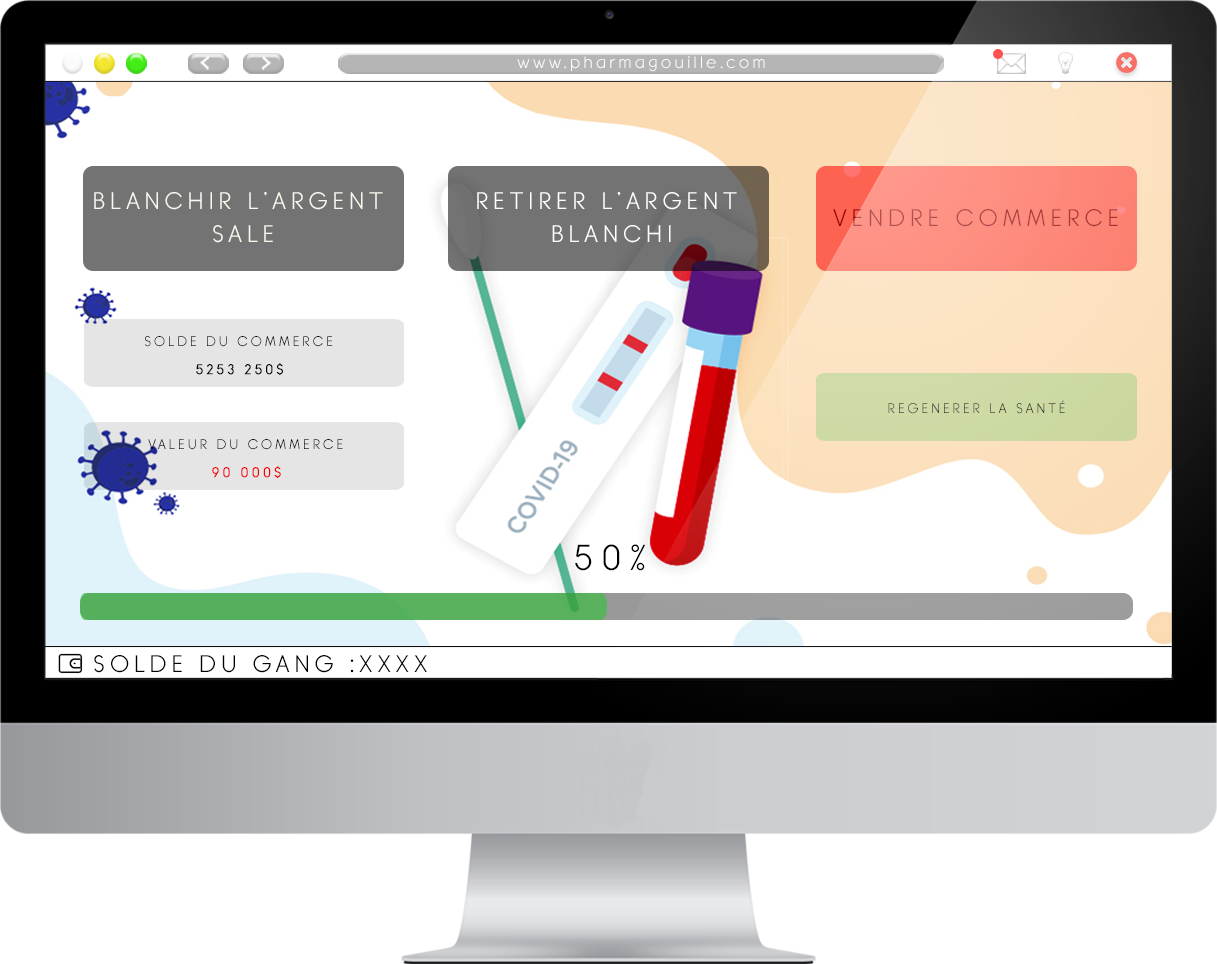
<style>
.page{position:relative;width:1217px;height:964px;background:#ffffff}
.page>*{position:absolute;margin:0}
.t1{font:16.4px "BanksMilesSingleLine";letter-spacing:0.2em;color:#ffffff}
.t2{font:24px/32px "BanksMilesSingleLine";letter-spacing:0.2em;color:#fbf8ee}
.t3{font:24px/32px "BanksMilesSingleLine";letter-spacing:0.2em;color:#ffffff}
.t4{font:24px "BanksMilesSingleLine";letter-spacing:0.2em;color:#ac4747}
.t5{font:14px "BanksMilesSingleLine";letter-spacing:0.2em;color:#000000}
.t6{font:14px "BanksMilesSingleLine";letter-spacing:0.2em;color:#000000;font-weight:bold}
.t7{font:14px "BanksMilesSingleLine";letter-spacing:0.2em;color:#2c2c2c}
.t8{font:14px "BanksMilesSingleLine";letter-spacing:0.2em;color:#f20000;font-weight:bold}
.t9{font:36px "BanksMilesSingleLine";letter-spacing:0.2em;color:#000000}
.t10{font:24px "BanksMilesSingleLine";letter-spacing:0.2em;color:#000000}
</style>
<div class="page">
<p class="t1" style="left:517px;top:56px;width:248px;height:16px">www.pharmagouille.com</p>
<p class="t2" style="left:94px;top:192px;width:289px;height:51px;text-align:center">BLANCHIR L’ARGENT <br>SALE</p>
<p class="t3" style="left:477px;top:192px;width:260px;height:51px;text-align:center">RETIRER L’ARGENT <br>BLANCHI</p>
<p class="t4" style="left:833px;top:209px;width:285px;height:18px">VENDRE COMMERCE</p>
<p class="t5" style="left:145px;top:336px;width:188px;height:11px">SOLDE DU COMMERCE</p>
<p class="t6" style="left:196px;top:363px;width:87px;height:12px">5253 250$</p>
<p class="t7" style="left:888px;top:400px;width:177px;height:14px">REGENERER LA SANTÉ</p>
<p class="t5" style="left:148px;top:439px;width:195px;height:11px">VALEUR DU COMMERCE</p>
<p class="t8" style="left:212px;top:466px;width:69px;height:12px">90 000$</p>
<p class="t9" style="left:575px;top:544px;width:71px;height:27px">50%</p>
<p class="t10" style="left:94px;top:655px;width:333px;height:18px">SOLDE DU GANG :XXXX</p>
</div>
